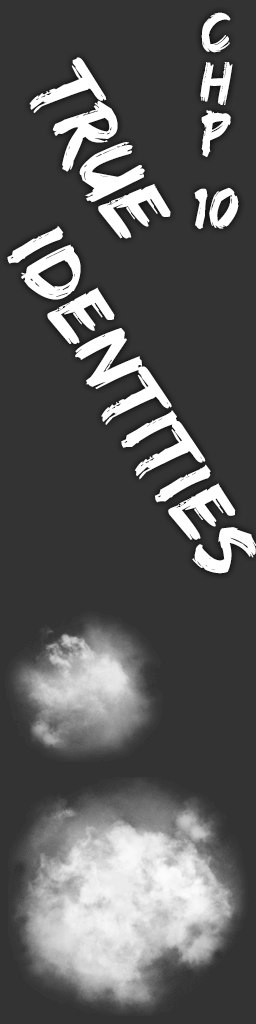
<style>
.page{position:relative;width:256px;height:1024px;background:#333333}
.page>*{position:absolute;margin:0}
.t1{font:60px/25.1px "EdoSZ";letter-spacing:0.03em;color:#ffffff}
.t2{font:91.3px "EdoSZ";letter-spacing:0.03em;color:#ffffff;scale:0.96 1}
.t3{font:86.6px "EdoSZ";letter-spacing:0.03em;color:#ffffff}
</style>
<div class="page">
<p class="t1" style="left:194px;top:12px;width:45px;height:217px;text-align:center">C<br><br>H<br><br>P<br><br><br>10</p>
<p class="t2" style="left:29px;top:57px;width:142px;height:182px;rotate:60deg">True</p>
<p class="t3" style="left:7px;top:226px;width:250px;height:348px;rotate:58deg">Identities</p>
</div>
